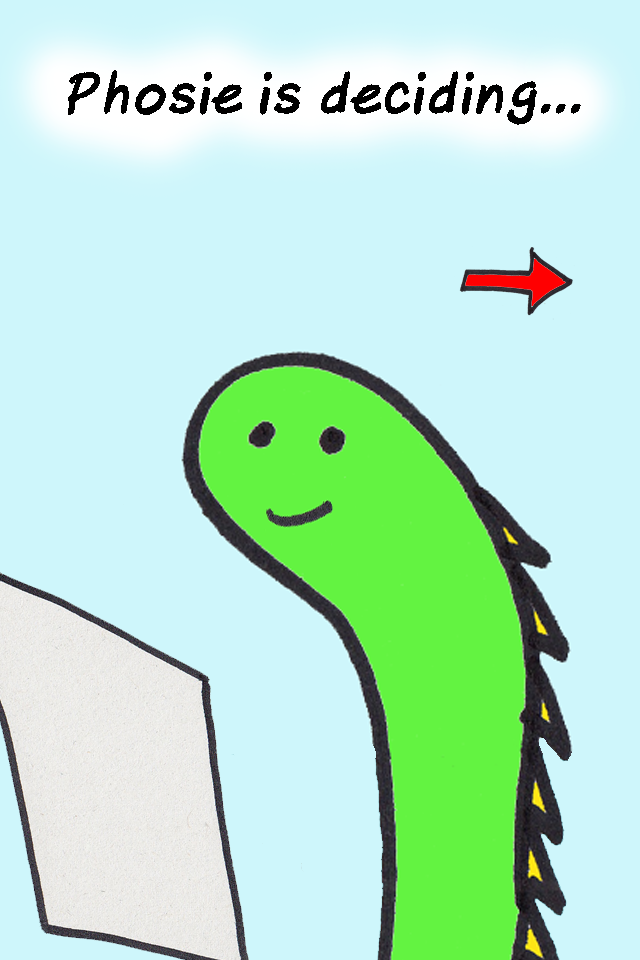
<style>
.page{position:relative;width:640px;height:960px;background:#cef6fb}
.page>*{position:absolute;margin:0}
.t1{font:54px "AxureHandwriting-BoldItalic";color:#000000}
</style>
<div class="page">
<p class="t1" style="left:68px;top:70px;width:513px;height:55px">Phosie is deciding...</p>
</div>
